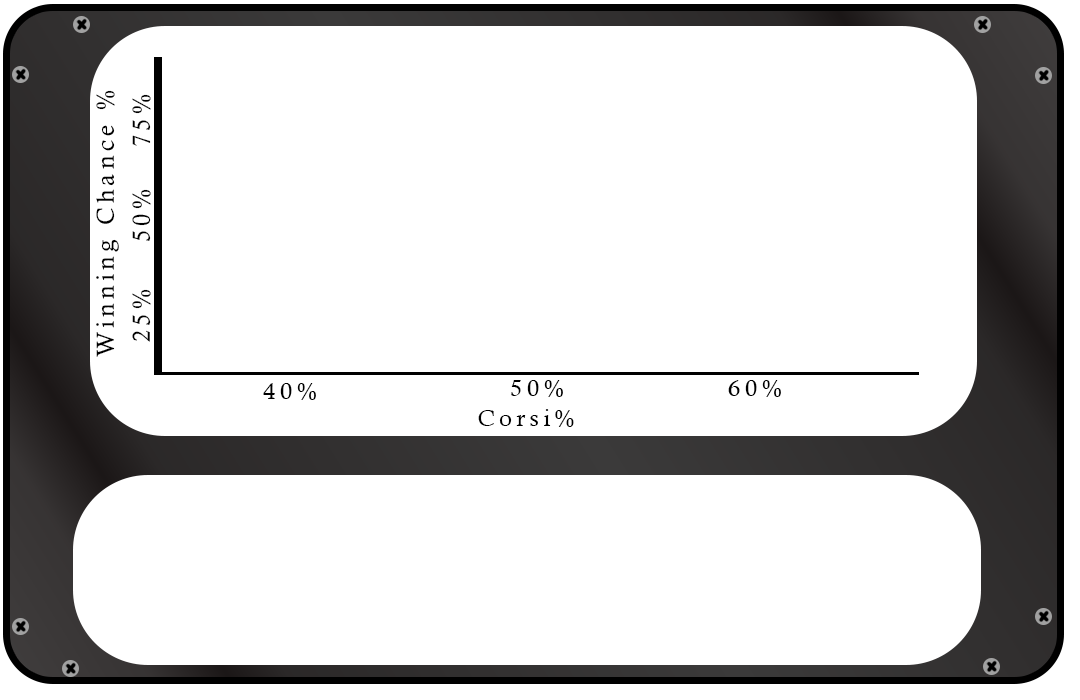
<style>
.page{position:relative;width:1080px;height:700px;background:#ffffff}
.page>*{position:absolute;margin:0}
.t1{font:24.3px "CalistoMT";letter-spacing:0.18em;color:#000000}
</style>
<div class="page">
<p class="t1" style="left:96px;top:90px;width:23px;height:267px;rotate:-90deg">Winning Chance %</p>
<p class="t1" style="left:132px;top:94px;width:19px;height:52px;rotate:-90deg">75%</p>
<p class="t1" style="left:132px;top:189px;width:19px;height:52px;rotate:-90deg">50%</p>
<p class="t1" style="left:132px;top:289px;width:19px;height:53px;rotate:-90deg">25%</p>
<p class="t1" style="left:263px;top:383px;width:53px;height:17px">40%</p>
<p class="t1" style="left:511px;top:380px;width:52px;height:17px">50%</p>
<p class="t1" style="left:728px;top:380px;width:53px;height:17px">60%</p>
<p class="t1" style="left:478px;top:409px;width:96px;height:18px">Corsi%</p>
</div>
